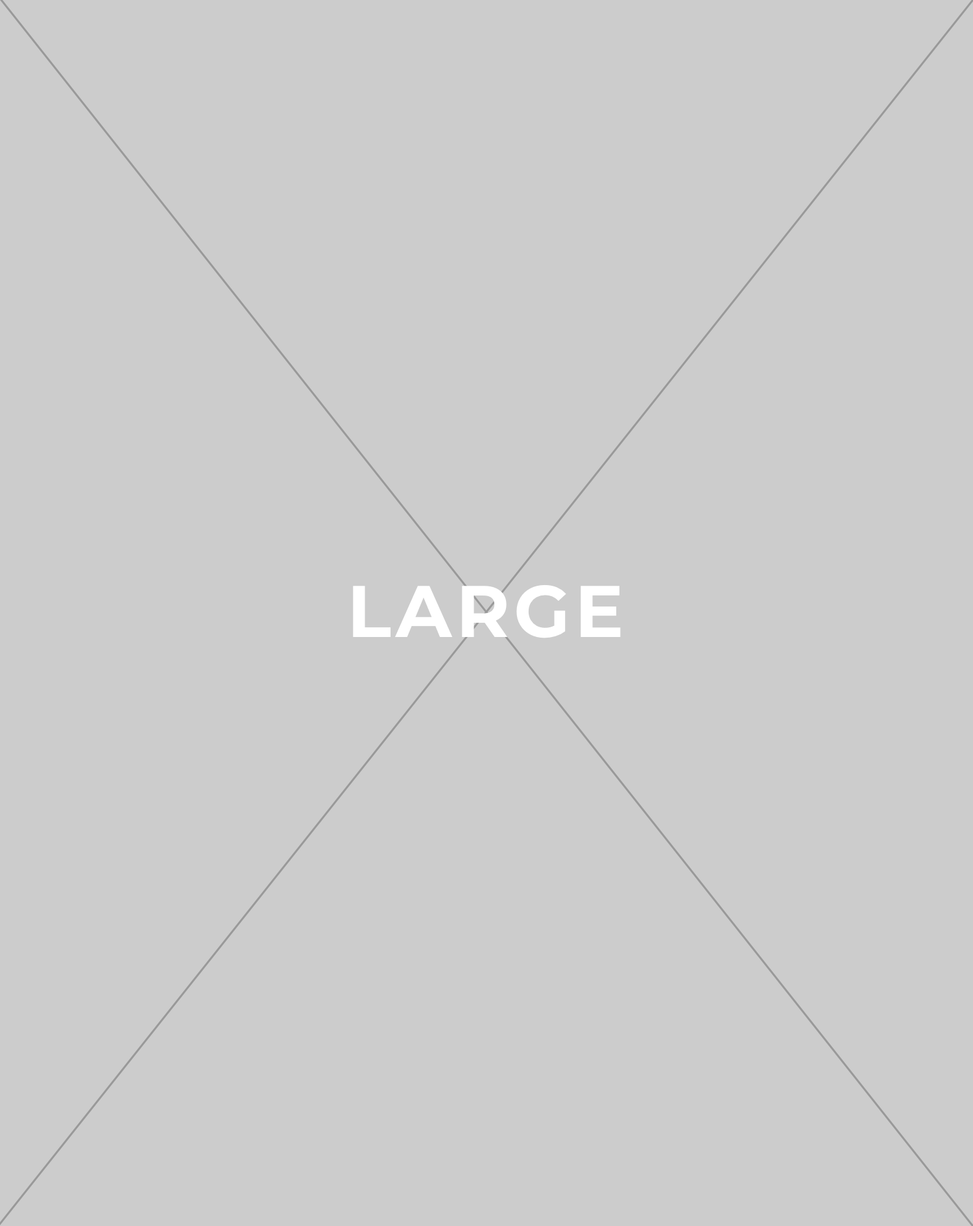
<style>
.page{position:relative;width:973px;height:1226px;background:#cccccc}
.page>*{position:absolute;margin:0}
.t1{font:73px "Montserrat-Bold";letter-spacing:0.06em;color:#ffffff}
</style>
<div class="page">
<p class="t1" style="left:353px;top:584px;width:268px;height:54px">LARGE</p>
</div>
